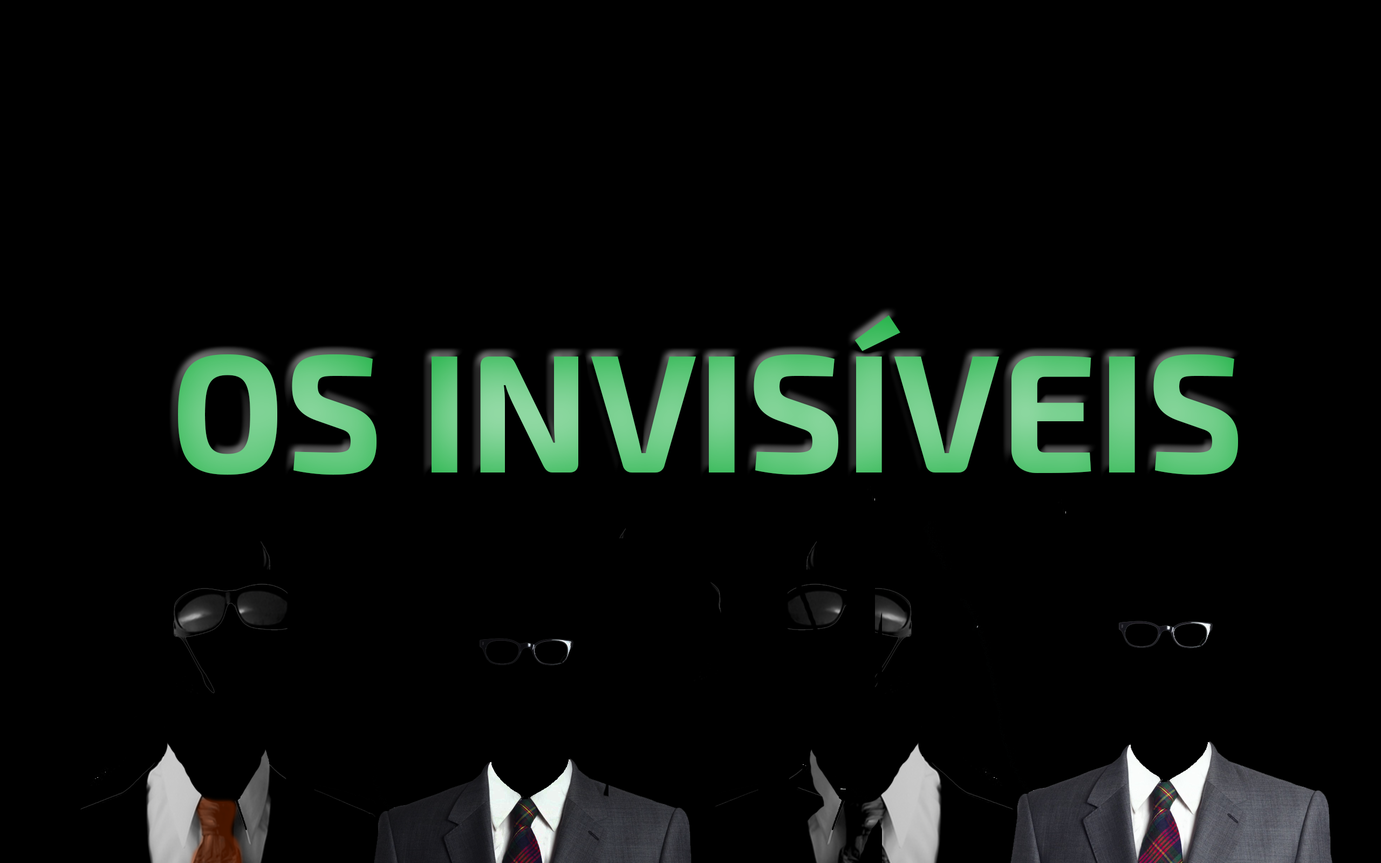
<style>
.page{position:relative;width:1381px;height:863px;background:#000000}
.page>*{position:absolute;margin:0}
.t1{font:168.4px "Exo2-Bold";color:#69cb82}
</style>
<div class="page">
<p class="t1" style="left:178px;top:315px;width:1060px;height:160px">OS INVISÍVEIS</p>
</div>
